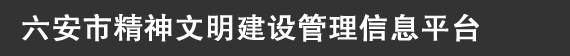
<style>
.page{position:relative;width:570px;height:56px;background:#333333}
.page>*{position:absolute;margin:0}
.t1{font:29.6px "FZHTK--GBK1-0";letter-spacing:0.01em;color:#ffffff;font-weight:bold}
</style>
<div class="page">
<p class="t1" style="left:22px;top:13px;width:457px;height:29px">六安市精神文明建设管理信息平台</p>
</div>
